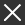
<style>
.page{position:relative;width:25px;height:25px;background:#333333}
.page>*{position:absolute;margin:0}
.t1{font:36px "FZSTK--GBK1-0";color:#ffffff}
</style>
<div class="page">
<p class="t1" style="left:3px;top:4px;width:18px;height:17px">×</p>
</div>
